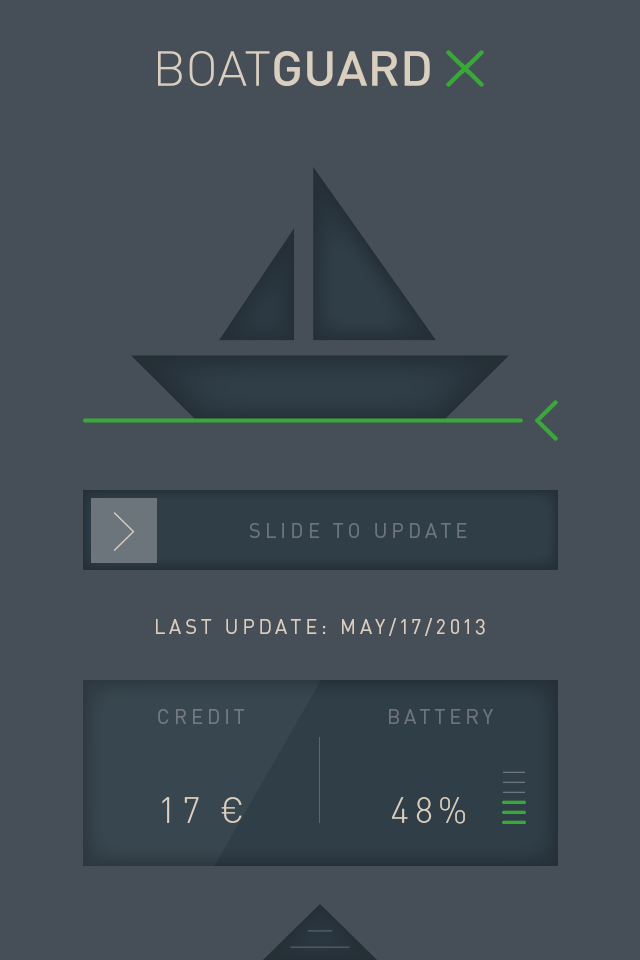
<style>
.page{position:relative;width:640px;height:960px;background:#464f58}
.page>*{position:absolute;margin:0}
.t1{font:20px "DINPro";letter-spacing:0.2em;color:#6d747c}
.t2{font:20px "DINPro";letter-spacing:0.2em;color:#dacebe}
.t3{font:20.3px "DINPro";letter-spacing:0.2em;color:#6d747c}
.t4{font:35.9px "DINPro-Light";letter-spacing:0.15em;color:#dacebe}
</style>
<div class="page">
<p class="t1" style="left:249px;top:523px;width:218px;height:15px">SLIDE TO UPDATE</p>
<p class="t2" style="left:156px;top:618px;width:329px;height:18px">LAST UPDATE: MAY/17/2013</p>
<p class="t3" style="left:158px;top:709px;width:87px;height:15px">CREDIT</p>
<p class="t3" style="left:389px;top:709px;width:104px;height:15px">BATTERY</p>
<p class="t4" style="left:162px;top:797px;width:80px;height:26px">17 €</p>
<p class="t4" style="left:392px;top:797px;width:73px;height:27px">48%</p>
</div>
